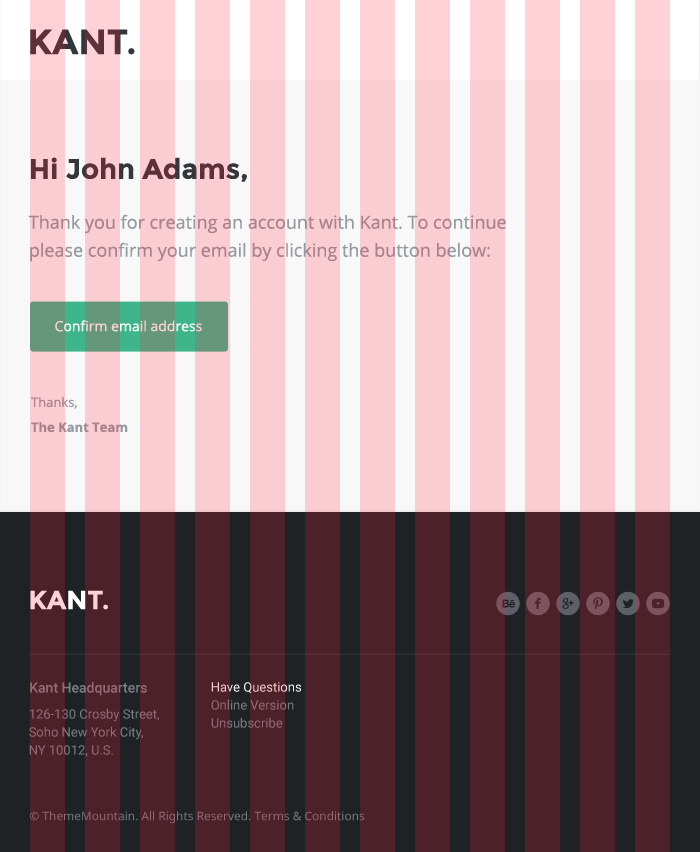
<style>
.page{position:relative;width:700px;height:852px;background:#f9cdd2}
.page>*{position:absolute;margin:0}
.t1{font:35px "Montserrat-Bold";color:#5c313a}
.t2{font:28px "Montserrat-Bold"}
.t3{font:18px/28px "OpenSans"}
.t4{font:14px "OpenSans"}
.t5{font:13px/25px "OpenSans-Bold";color:#ab818c}
.t6{font:13px/25px "OpenSans";color:#ab818c}
.t7{font:26px "Montserrat-Bold"}
.t8{font:14px "Roboto-Medium";color:#956a75}
.t9{font:13px/18px "Roboto-Regular"}
.t10{font:13px/18px "Roboto-Regular";color:#956a75}
.t11{font:12px "OpenSans";color:#956a75}
</style>
<div class="page">
<p class="t1" style="left:30px;top:29px;width:105px;height:26px">KANT.</p>
<p class="t2" style="left:31px;top:157px;width:216px;height:25px">Hi John Adams,</p>
<p class="t3" style="left:28px;top:214px;width:478px;height:48px">Thank you for creating an account with Kant. To continue<br>please confirm your email by clicking the button below:</p>
<p class="t4" style="left:55px;top:320px;width:147px;height:12px">Confirm email address</p>
<p class="t5" style="left:31px;top:397px;width:97px;height:36px"><span class="t6">Thanks, <br></span>The Kant Team</p>
<p class="t7" style="left:30px;top:590px;width:78px;height:20px">KANT.</p>
<p class="t8" style="left:30px;top:682px;width:117px;height:14px">Kant Headquarters</p>
<p class="t9" style="left:211px;top:682px;width:90px;height:46px">Have Questions<br>Online Version<br>Unsubscribe</p>
<p class="t10" style="left:29px;top:708px;width:130px;height:49px">126-130 Crosby Street,<br>Soho New York City,<br>NY 10012, U.S.</p>
<p class="t11" style="left:29px;top:811px;width:336px;height:13px">© ThemeMountain. All Rights Reserved. Terms &amp; Conditions</p>
</div>
